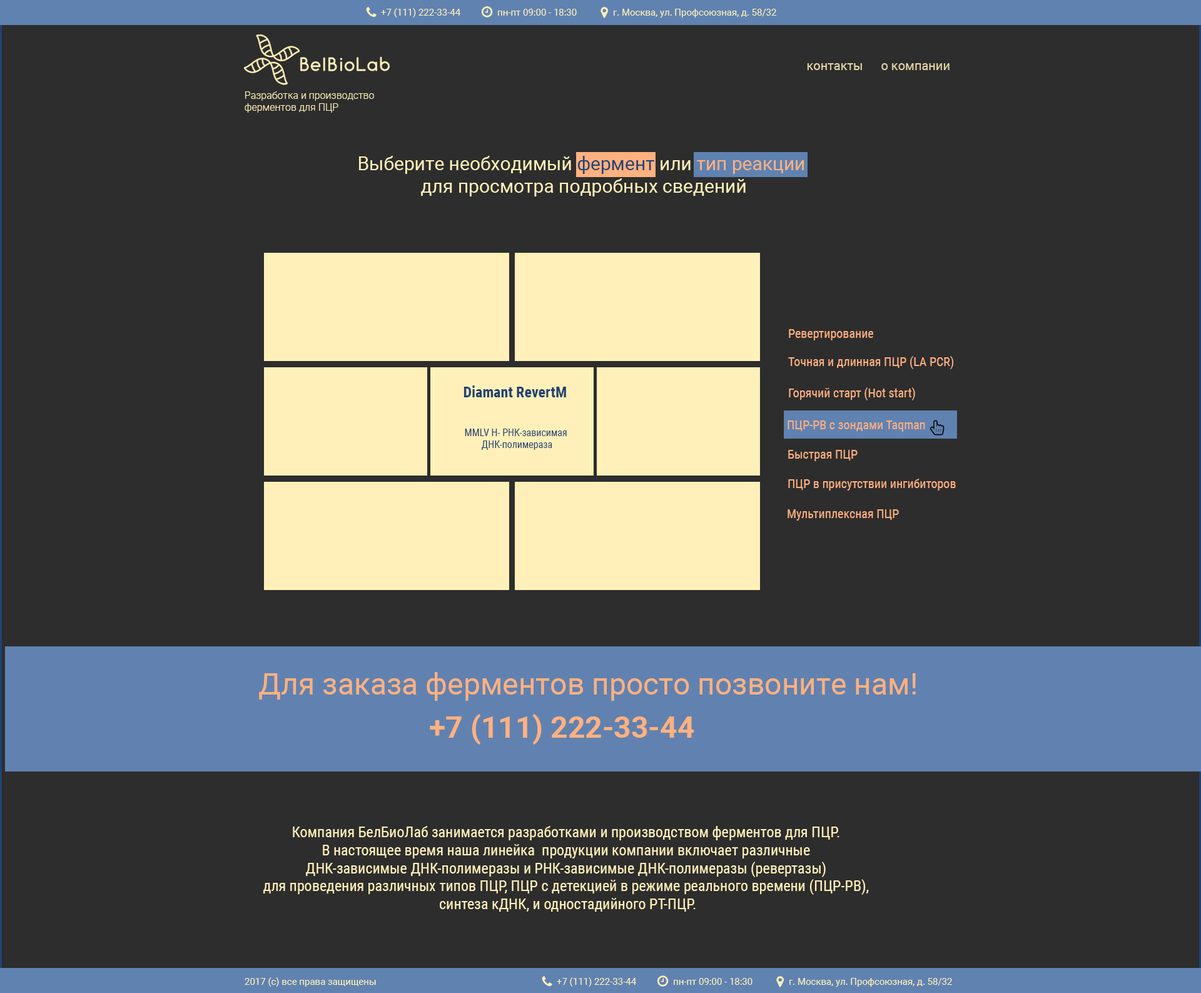
<style>
.page{position:relative;width:1201px;height:993px;background:#2d2d2d}
.page>*{position:absolute;margin:0}
.t1{font:9.4px "Roboto-Regular";color:#fff0b9}
.t2{font:12.5px "Roboto-Regular";color:#e2d5a6}
.t3{font:10px "Roboto-Light";color:#fff0b9}
.t4{font:18.8px "Roboto-Regular";color:#fff0b9}
.t5{font:18.8px "Roboto-Regular";color:#1f4272}
.t6{font:18.8px "Roboto-Regular";color:#ffb180}
.t7{font:12.5px "RobotoCondensed-Regular";color:#ffb180}
.t8{font:15px "RobotoCondensed-Bold";color:#1f4272}
.t9{font:10px "RobotoCondensed-Regular";color:#1f4272}
.t10{font:30px "Roboto-Regular";color:#ffb180}
.t11{font:30px "Roboto-Bold";color:#ffb180}
.t12{font:15px "RobotoCondensed-Regular";color:#fff0b9}
</style>
<div class="page">
<p class="t1" style="left:381px;top:8px;width:79px;height:10px">+7 (111) 222-33-44</p>
<p class="t1" style="left:498px;top:9px;width:79px;height:7px">пн-пт 09:00 - 18:30</p>
<p class="t1" style="left:614px;top:9px;width:162px;height:9px">г. Москва, ул. Профсоюзная, д. 58/32</p>
<p class="t2" style="left:807px;top:63px;width:55px;height:7px">контакты</p>
<p class="t2" style="left:881px;top:63px;width:69px;height:7px">о компании</p>
<p class="t3" style="left:245px;top:91px;width:129px;height:22px">Разработка и производство<br>ферментов для ПЦР</p>
<p class="t4" style="left:359px;top:156px;width:445px;height:40px;text-align:center">Выберите необходимый <span class="t5">фермент </span>или <span class="t6">тип реакции</span> <br>для просмотра подробных сведений</p>
<p class="t7" style="left:789px;top:329px;width:84px;height:11px">Ревертирование</p>
<p class="t7" style="left:788px;top:356px;width:166px;height:13px">Точная и длинная ПЦР (LA PCR)</p>
<p class="t8" style="left:464px;top:385px;width:102px;height:12px">Diamant RevertM</p>
<p class="t7" style="left:789px;top:387px;width:126px;height:13px">Горячий старт (Hot start)</p>
<p class="t7" style="left:788px;top:420px;width:137px;height:12px">ПЦР-РВ с зондами Taqman</p>
<p class="t9" style="left:465px;top:429px;width:102px;height:21px;text-align:center">MMLV H- РНК-зависимая <br>ДНК-полимераза</p>
<p class="t7" style="left:788px;top:450px;width:70px;height:11px">Быстрая ПЦР</p>
<p class="t7" style="left:788px;top:479px;width:168px;height:11px">ПЦР в присутствии ингибиторов</p>
<p class="t7" style="left:788px;top:509px;width:111px;height:11px">Мультиплексная ПЦР</p>
<p class="t10" style="left:259px;top:672px;width:657px;height:29px">Для заказа ферментов просто позвоните нам!</p>
<p class="t11" style="left:430px;top:714px;width:264px;height:30px">+7 (111) 222-33-44</p>
<p class="t12" style="left:263px;top:826px;width:606px;height:85px;text-align:center">Компания БелБиоЛаб занимается разработками и производством ферментов для ПЦР. <br>В настоящее время наша линейка  продукции компании включает различные <br>ДНК-зависимые ДНК-полимеразы и РНК-зависимые ДНК-полимеразы (ревертазы) <br>для проведения различных типов ПЦР, ПЦР с детекцией в режиме реального времени (ПЦР-РВ), <br>синтеза кДНК, и одностадийного РТ-ПЦР.</p>
<p class="t1" style="left:245px;top:977px;width:131px;height:10px">2017 (с) все права защищены</p>
<p class="t1" style="left:557px;top:977px;width:79px;height:10px">+7 (111) 222-33-44</p>
<p class="t1" style="left:674px;top:978px;width:79px;height:7px">пн-пт 09:00 - 18:30</p>
<p class="t1" style="left:789px;top:978px;width:163px;height:9px">г. Москва, ул. Профсоюзная, д. 58/32</p>
</div>
